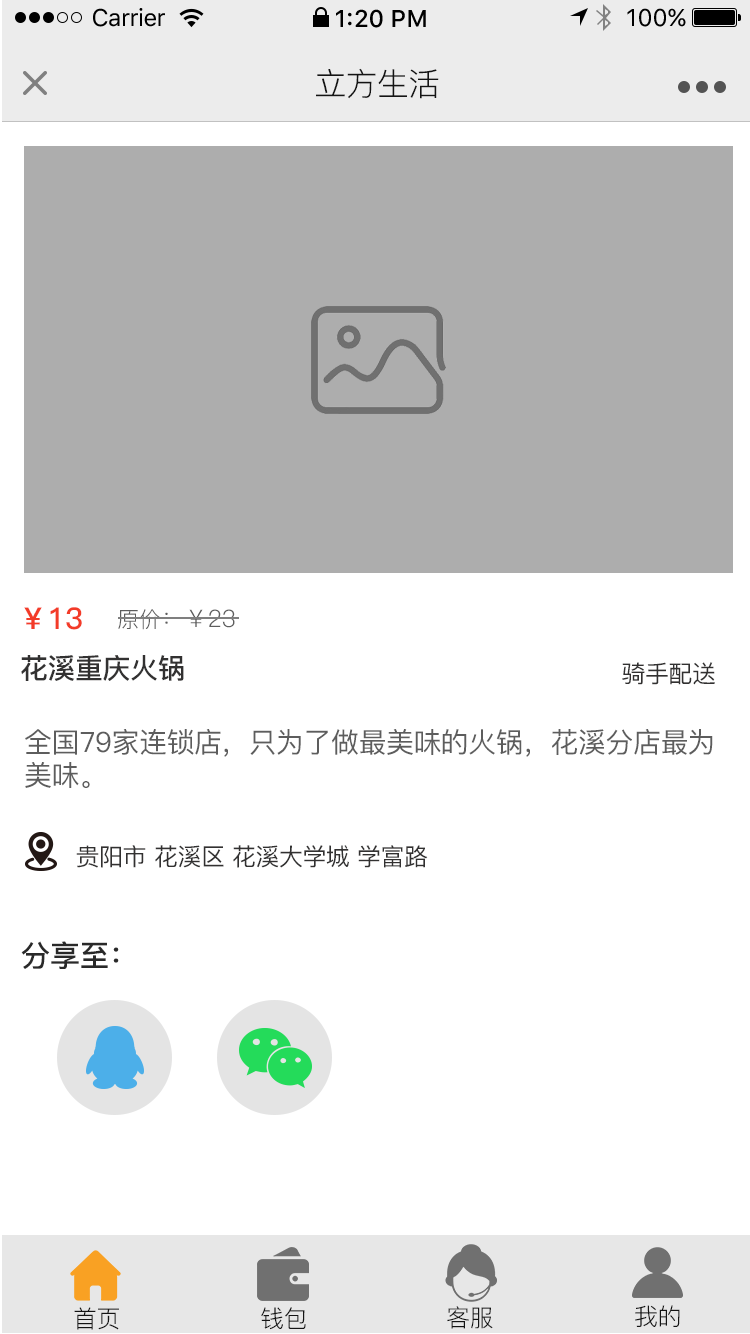
<style>
.page{position:relative;width:750px;height:1334px;background:#ffffff}
.page>*{position:absolute;margin:0}
.t1{font:24px "SFUIText-Regular";letter-spacing:-0.025em;color:#000000}
.t2{font:24px "SFUIText-Medium";color:#000000}
.t3{font:24px "SFUIText-Regular";color:#000000}
.t4{font:32px "PingFang-SC-Regular";letter-spacing:-0.02em;color:#141414}
.t5{font:30px "PingFang-SC-Bold";letter-spacing:-0.02em;color:#f33b28}
.t6{font:24px "PingFang-SC-Regular";letter-spacing:-0.02em;color:#5d5d5d}
.t7{font:22px "PingFang-SC-Regular";letter-spacing:-0.02em;color:#5d5d5d}
.t8{font:28px "PingFang-SC-Bold";letter-spacing:-0.02em;color:#323131}
.t9{font:24px "PingFang-SC-Medium";letter-spacing:-0.02em;color:#323131}
.t10{font:28px/33px "PingFang-SC-Medium";letter-spacing:-0.02em;color:#5d5d5d}
.t11{font:30px "PingFang-SC-Bold";letter-spacing:-0.02em;color:#292929}
.t12{font:24px "PingFang-SC-Regular";letter-spacing:-0.02em;color:#141414}
</style>
<div class="page">
<p class="t1" style="left:93px;top:8px;width:72px;height:19px">Carrier</p>
<p class="t2" style="left:336px;top:9px;width:90px;height:19px">1:20 PM</p>
<p class="t3" style="left:627px;top:8px;width:59px;height:19px">100%</p>
<p class="t4" style="left:316px;top:68px;width:123px;height:31px">立方生活</p>
<p class="t5" style="left:24px;top:607px;width:58px;height:23px">￥13</p>
<p class="t6" style="left:118px;top:609px;width:117px;height:21px"><span class="t7">原价</span>：￥23</p>
<p class="t8" style="left:21px;top:655px;width:163px;height:26px">花溪重庆火锅</p>
<p class="t9" style="left:622px;top:662px;width:93px;height:23px">骑手配送</p>
<p class="t10" style="left:25px;top:729px;width:688px;height:59px">全国79家连锁店，只为了做最美味的火锅，花溪分店最为<br>美味。</p>
<p class="t9" style="left:76px;top:845px;width:352px;height:23px">贵阳市 花溪区 花溪大学城 学富路</p>
<p class="t11" style="left:21px;top:941px;width:98px;height:28px">分享至：</p>
<p class="t12" style="left:74px;top:1307px;width:45px;height:23px">首页</p>
<p class="t12" style="left:261px;top:1307px;width:45px;height:23px">钱包</p>
<p class="t12" style="left:447px;top:1306px;width:46px;height:23px">客服</p>
<p class="t12" style="left:635px;top:1305px;width:45px;height:22px">我的</p>
</div>
